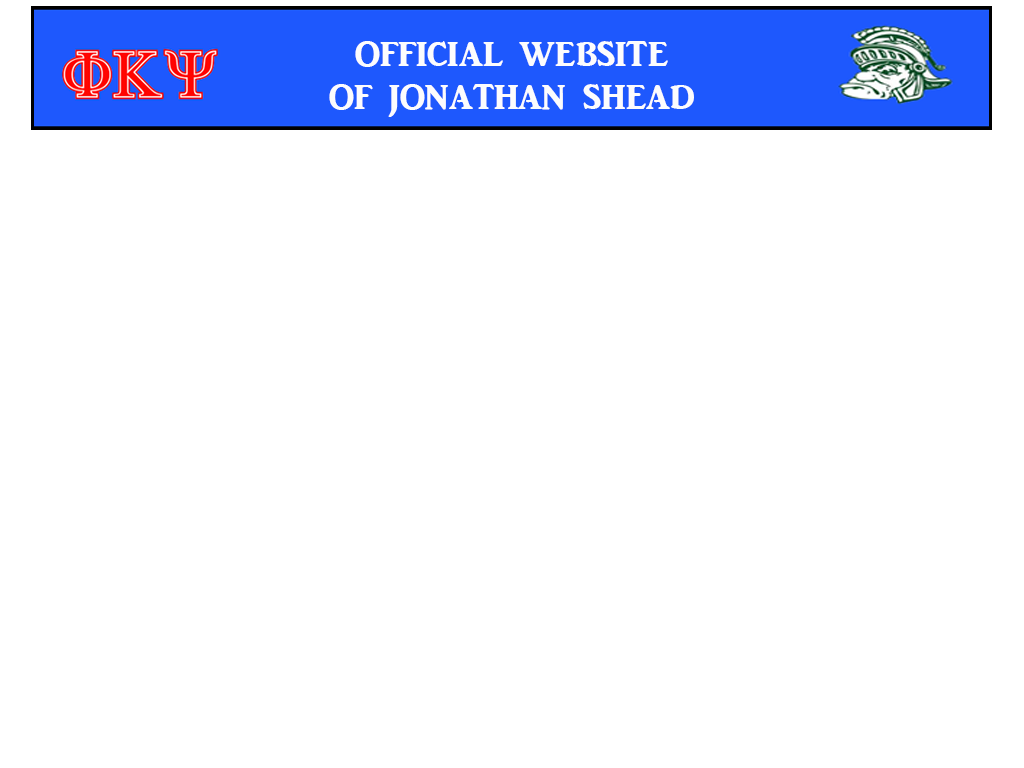
<style>
.page{position:relative;width:1024px;height:768px;background:#ffffff}
.page>*{position:absolute;margin:0}
.t1{font:36px "ARJULIAN";color:#fcfcfd;text-transform:uppercase}
</style>
<div class="page">
<p class="t1" style="left:329px;top:41px;width:365px;height:76px;text-align:center">Official website <br>of jonathan SHead</p>
</div>
